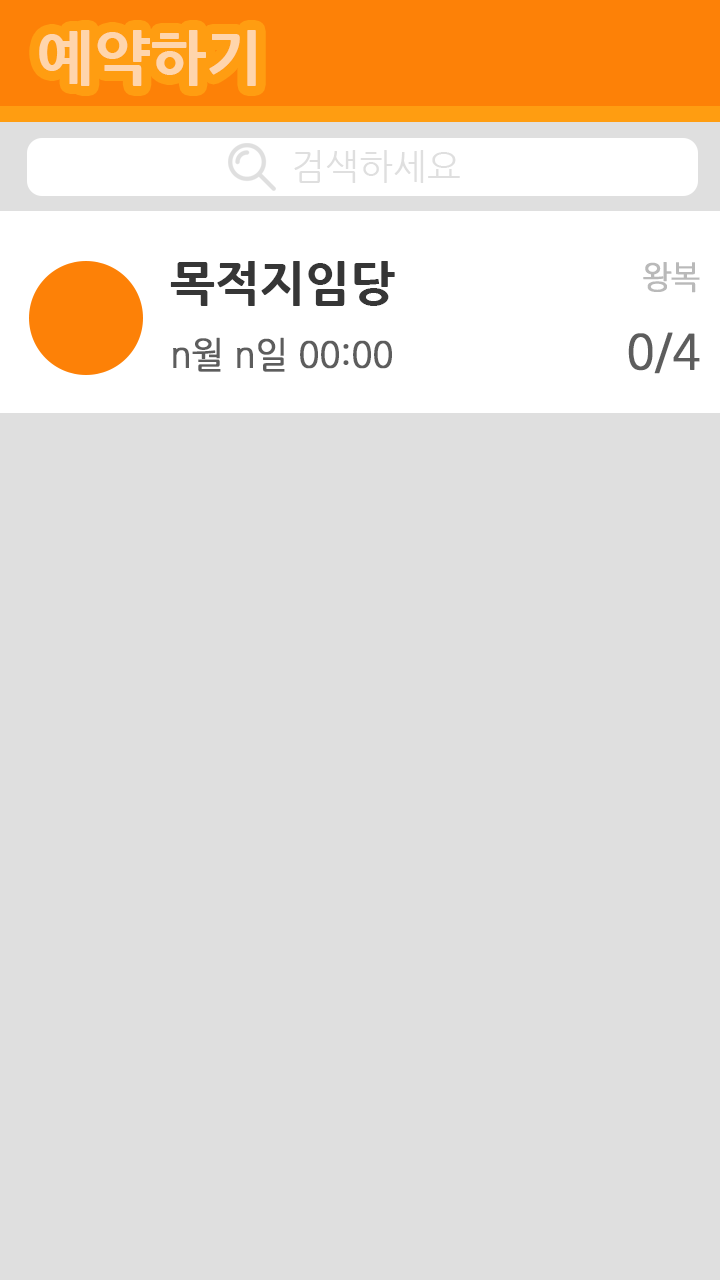
<style>
.page{position:relative;width:720px;height:1280px;background:#dfdfdf}
.page>*{position:absolute;margin:0}
.t1{font:60px "NanumGothicExtraBold";color:#ffd5ac}
.t2{font:36px "NanumGothic";color:#dfdfdf}
.t3{font:48px "NanumGothicExtraBold";color:#363636}
.t4{font:32px "NanumGothic";letter-spacing:-0.04em;color:#b9b9b9;font-weight:bold;scale:0.96 1}
.t5{font:36px "NanumGothic";letter-spacing:-0.02em;color:#5d5d5d;font-weight:bold;scale:0.96 1}
.t6{font:48px "NanumGothic";letter-spacing:-0.02em;color:#5d5d5d;font-weight:bold;scale:0.96 1}
</style>
<div class="page">
<p class="t1" style="left:39px;top:30px;width:217px;height:56px">예약하기</p>
<p class="t2" style="left:294px;top:150px;width:166px;height:33px">검색하세요</p>
<p class="t3" style="left:170px;top:261px;width:225px;height:45px">목적지임당</p>
<p class="t4" style="left:643px;top:262px;width:57px;height:31px">왕복</p>
<p class="t5" style="left:173px;top:337px;width:219px;height:35px">n월 n일 00:00</p>
<p class="t6" style="left:628px;top:332px;width:72px;height:42px">0/4</p>
</div>
